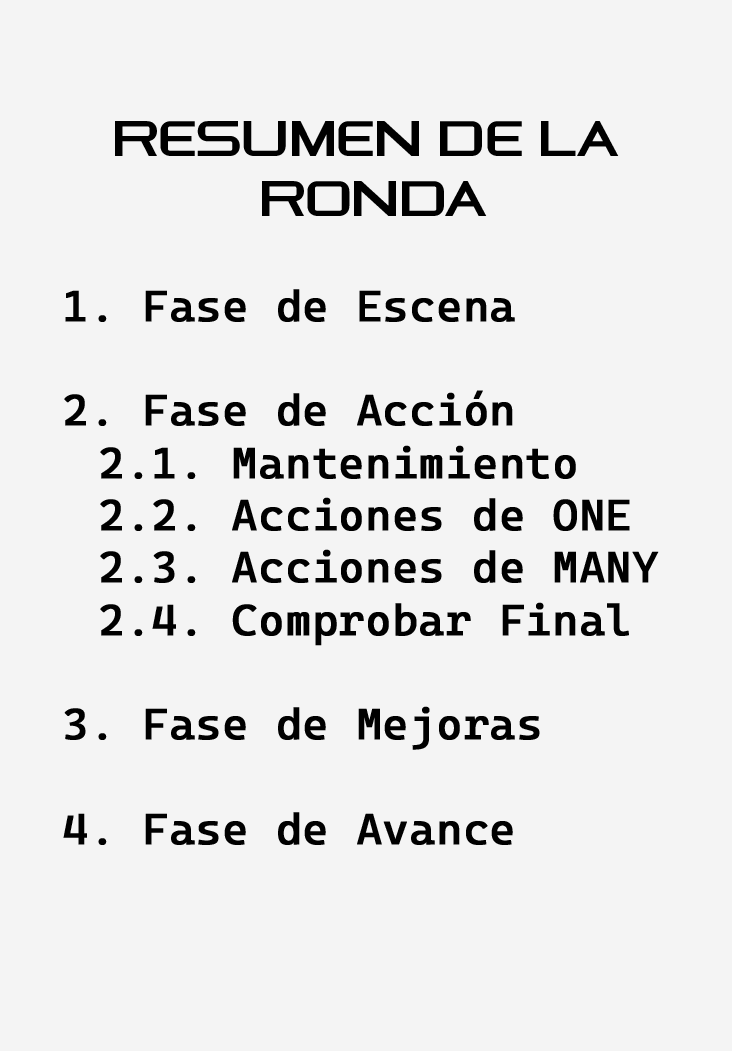
<style>
.page{position:relative;width:732px;height:1051px;background:#f4f4f4}
.page>*{position:absolute;margin:0}
.t1{font:49.8px "AstroheadFREERegular";color:#000000}
.t2{font:43.6px "CascadiaMono-Regular";color:#000000;font-weight:bold}
</style>
<div class="page">
<p class="t1" style="left:115px;top:121px;width:504px;height:95px;text-align:center">RESUMEN DE LA <br>RONDA</p>
<p class="t2" style="left:63px;top:289px;width:596px;height:556px">1. Fase de Escena<br><br>2. Fase de Acción<br> 2.1. Mantenimiento<br> 2.2. Acciones de ONE<br> 2.3. Acciones de MANY<br> 2.4. Comprobar Final<br><br>3. Fase de Mejoras<br><br>4. Fase de Avance</p>
</div>
